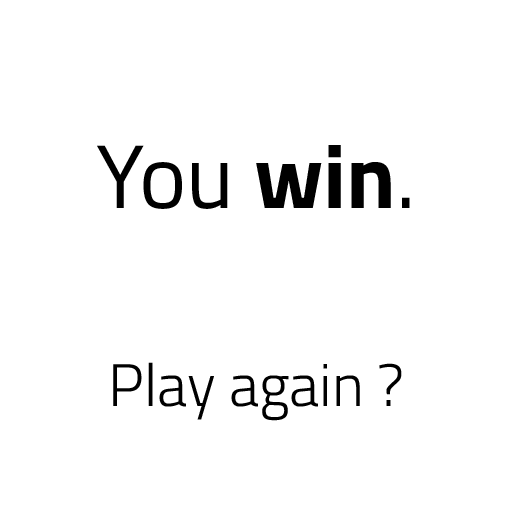
<style>
.page{position:relative;width:512px;height:512px;background:#ffffff}
.page>*{position:absolute;margin:0}
.t1{font:90px "TitilliumWeb-Regular";color:#000000}
.t2{font:90px "TitilliumWeb-Bold";color:#000000}
.t3{font:60px "TitilliumWeb-Light";color:#000000}
</style>
<div class="page">
<p class="t1" style="left:97px;top:145px;width:313px;height:64px">You <span class="t2">win</span>.</p>
<p class="t3" style="left:113px;top:362px;width:289px;height:59px">Play again ?</p>
</div>
